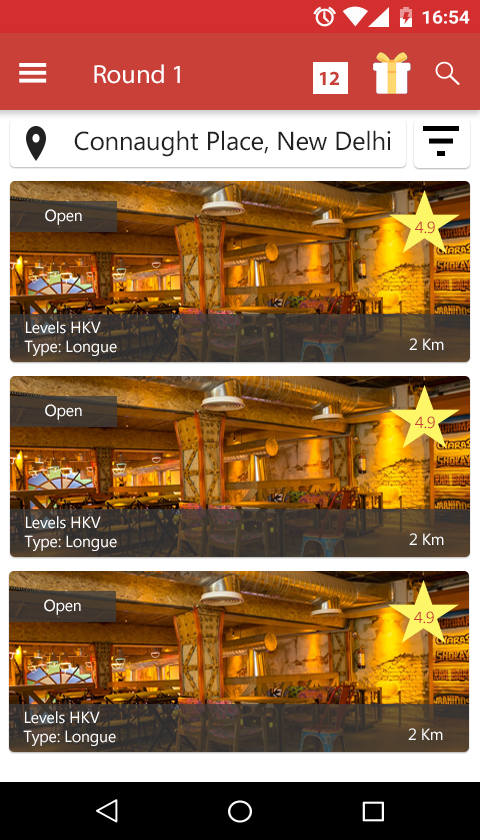
<style>
.page{position:relative;width:480px;height:840px}
.page>*{position:absolute;margin:0}
.t1{font:26.1px "MyriadPro-Regular";letter-spacing:-0.01em;color:#ffffff;scale:1.03 1}
.t2{font:20px "MyriadPro-Bold";letter-spacing:-0.01em;color:#c94038}
.t3{font:26px "MicrosoftNewTaiLue";letter-spacing:-0.01em;color:#212121}
.t4{font:16px "MicrosoftNewTaiLue";letter-spacing:-0.01em;color:#ffffff}
.t5{font:16px "MicrosoftNewTaiLue";letter-spacing:-0.01em;color:#c94038}
</style>
<div class="page">
<p class="t1" style="left:94px;top:64px;width:86px;height:20px">Round 1</p>
<p class="t2" style="left:319px;top:71px;width:20px;height:14px">12</p>
<p class="t3" style="left:74px;top:130px;width:317px;height:27px">Connaught Place, New Delhi</p>
<p class="t4" style="left:45px;top:209px;width:37px;height:16px">Open</p>
<p class="t5" style="left:415px;top:221px;width:20px;height:13px">4.9</p>
<p class="t4" style="left:24px;top:321px;width:93px;height:35px">Levels HKV<br>Type: Longue</p>
<p class="t4" style="left:409px;top:338px;width:35px;height:12px">2 Km</p>
<p class="t4" style="left:45px;top:404px;width:37px;height:16px">Open</p>
<p class="t5" style="left:415px;top:416px;width:20px;height:13px">4.9</p>
<p class="t4" style="left:24px;top:516px;width:93px;height:35px">Levels HKV<br>Type: Longue</p>
<p class="t4" style="left:409px;top:533px;width:35px;height:12px">2 Km</p>
<p class="t4" style="left:44px;top:599px;width:37px;height:16px">Open</p>
<p class="t5" style="left:414px;top:611px;width:20px;height:13px">4.9</p>
<p class="t4" style="left:23px;top:711px;width:93px;height:35px">Levels HKV<br>Type: Longue</p>
<p class="t4" style="left:408px;top:728px;width:35px;height:12px">2 Km</p>
</div>
